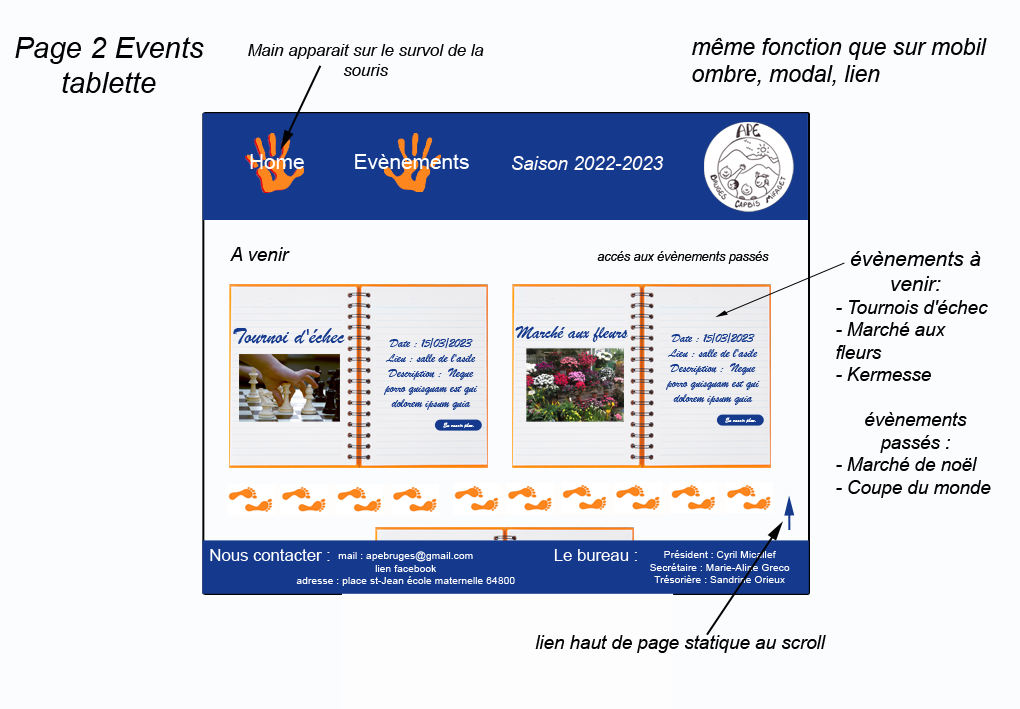
<style>
.page{position:relative;width:1020px;height:709px;background:#fbfcfe}
.page>*{position:absolute;margin:0}
.t1{font:29.2px "Arial-ItalicMT";color:#020202}
.t2{font:22.9px "Arial-ItalicMT";color:#020202}
.t3{font:16.7px "Arial-ItalicMT";color:#020202}
.t4{font:20.8px "ArialMT";color:#fdfeff}
.t5{font:18.8px "Arial-ItalicMT";color:#fefafa}
.t6{font:18.8px "Arial-ItalicMT";color:#020202}
.t7{font:12.5px "Arial-ItalicMT";color:#020202}
.t8{font:18.7px "Arial-ItalicMT";color:#020202}
.t9{font:20.8px "Arial-ItalicMT";color:#020202}
.t10{font:22.9px "BrushScriptMT";color:#14398d}
.t11{font:18.8px "BrushScriptMT";color:#14398d}
.t12{font:12.5px "BrushScriptMT";color:#14398d}
.t13{font:6.2px "BrushScriptMT";color:#ffffff}
.t14{font:6.2px "BrushScriptMT";color:#14398d}
.t15{font:16.7px "ArialMT";color:#ffffff}
.t16{font:10.4px "ArialMT";color:#ffffff}
</style>
<div class="page">
<p class="t1" style="left:15px;top:37px;width:189px;height:56px;text-align:center">Page 2 Events<br>tablette</p>
<p class="t2" style="left:692px;top:38px;width:295px;height:48px">même fonction que sur mobil ombre, modal, lien</p>
<p class="t3" style="left:248px;top:44px;width:236px;height:32px;text-align:center">Main apparait sur le survol de la souris</p>
<p class="t4" style="left:250px;top:154px;width:54px;height:15px">Home</p>
<p class="t4" style="left:355px;top:154px;width:114px;height:15px">Evènements</p>
<p class="t5" style="left:512px;top:156px;width:152px;height:14px">Saison 2022-2023</p>
<p class="t6" style="left:230px;top:247px;width:60px;height:14px">A venir</p>
<p class="t7" style="left:597px;top:251px;width:172px;height:13px">accés aux évènements passés</p>
<p class="t8" style="left:836px;top:251px;width:155px;height:247px;text-align:center"><span class="t9">évènements à venir:<br></span>- Tournois d'échec<br>- Marché aux fleurs<br>- Kermesse<br><br>évènements passés :<br>- Marché de noël<br>- Coupe du monde</p>
<p class="t10" style="left:233px;top:328px;width:112px;height:16px">Tournoi d'échec</p>
<p class="t11" style="left:515px;top:326px;width:113px;height:16px">Marché aux fleurs</p>
<p class="t12" style="left:384px;top:338px;width:94px;height:72px;text-align:center">Date : 15/03/2023<br>Lieu : salle de l'asile<br>Description :  Neque porro quisquam est qui dolorem ipsum quia</p>
<p class="t12" style="left:666px;top:333px;width:94px;height:72px;text-align:center">Date : 15/03/2023<br>Lieu : salle de l'asile<br>Description :  Neque porro quisquam est qui dolorem ipsum quia</p>
<p class="t13" style="left:443px;top:422px;width:35px;height:6px">En savoir plus.<span class="t14">..</span></p>
<p class="t13" style="left:725px;top:417px;width:35px;height:6px">En savoir plus.<span class="t14">..</span></p>
<p class="t15" style="left:210px;top:549px;width:120px;height:12px">Nous contacter :</p>
<p class="t16" style="left:296px;top:551px;width:219px;height:35px;text-align:center">mail : apebruges@gmail.com  <br>lien facebook <br>adresse : place st-Jean école maternelle 64800 Bruges</p>
<p class="t15" style="left:554px;top:549px;width:83px;height:12px">Le bureau :</p>
<p class="t16" style="left:650px;top:550px;width:140px;height:33px;text-align:center">Président : Cyril Micallef<br>Secrétaire : Marie-Aline Greco<br>Trésorière : Sandrine Orieux</p>
<p class="t6" style="left:535px;top:635px;width:291px;height:18px">lien haut de page statique au scroll</p>
</div>
